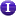
<style>
.page{position:relative;width:16px;height:16px;background:#ffffff}
.page>*{position:absolute;margin:0}
.t1{font:13px "TimesNewRomanPS-BoldMT";color:#ffffff}
</style>
<div class="page">
<p class="t1" style="left:5px;top:3px;width:6px;height:9px">I</p>
</div>
